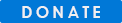
<style>
.page{position:relative;width:122px;height:23px;background:#0078d7}
.page>*{position:absolute;margin:0}
.t1{font:16px "CenturyGothic-Bold";letter-spacing:0.2em;color:#f0f0f0}
</style>
<div class="page">
<p class="t1" style="left:22px;top:6px;width:78px;height:12px">DONATE</p>
</div>
